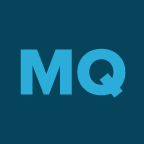
<style>
.page{position:relative;width:144px;height:144px;background:#06445b}
.page>*{position:absolute;margin:0}
.t1{font:67px "ProximaNova-Extrabld";color:#2bacd9}
</style>
<div class="page">
<p class="t1" style="left:20px;top:48px;width:106px;height:50px">MQ</p>
</div>
